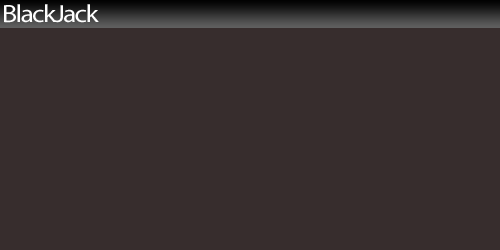
<style>
.page{position:relative;width:500px;height:250px;background:#372d2d}
.page>*{position:absolute;margin:0}
.t1{font:25px "MyriadPro-Regular";letter-spacing:-0.06em;color:#ffffff;scale:1.11 1}
</style>
<div class="page">
<p class="t1" style="left:4px;top:4px;width:95px;height:19px">BlackJack</p>
</div>
